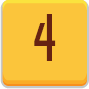
<style>
.page{position:relative;width:89px;height:89px;background:#fbc53b}
.page>*{position:absolute;margin:0}
.t1{font:60px "LibelSuitRg-Regular";color:#662312}
</style>
<div class="page">
<p class="t1" style="left:34px;top:14px;width:22px;height:47px">4</p>
</div>
